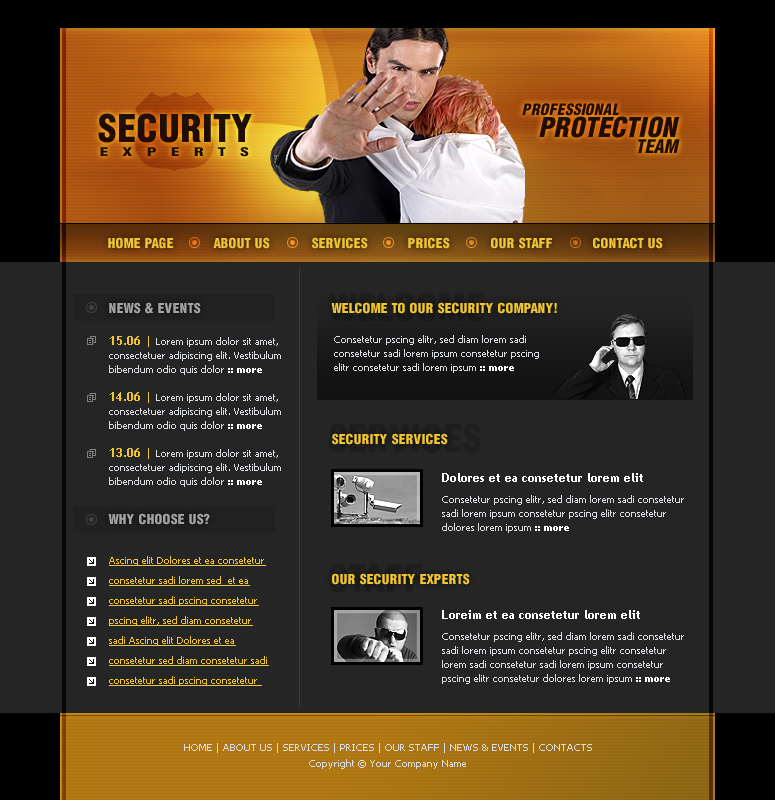
<style>
.page{position:relative;width:775px;height:800px;background:#252525}
.page>*{position:absolute;margin:0}
.t1{font:39px "HeliosCondBlack";color:#1f0e05}
.t2{font:16px "HeliosCondBlack-Italic";color:#1f0e05}
.t3{font:28px "HeliosCondBlack-Italic";color:#1f0e05}
.t4{font:12.1px "HeliosCondBlack";letter-spacing:0.78em;color:#1f0e06;scale:1.49 1}
.t5{font:19px "HeliosCondBlack-Italic";color:#1f0d05}
.t6{font:14px "HeliosCondBlack";color:#efc530}
.t7{font:14px "HeliosCondBlack";color:#a3a3a3}
.t8{font:10px/14px "Tahoma";color:#dadde2}
.t9{font:12px/14px "TrebuchetMS-Bold";color:#efc530}
.t10{font:10px/14px "Tahoma-Bold";color:#ffffff}
.t11{font:39px "HeliosCondBlack";color:#1e1e1e}
.t12{font:12px "TrebuchetMS-Bold";color:#ffffff}
.t13{font:10px/20px "Tahoma";color:#efc530;text-decoration:underline}
.t14{font:39px "HeliosCondBlack";color:#1d1d1d}
.t15{font:10px/16px "Tahoma";color:#dadde2}
</style>
<div class="page">
<p class="t1" style="left:98px;top:113px;width:154px;height:30px">SECURITY</p>
<p class="t2" style="left:522px;top:103px;width:97px;height:13px">PROFESSIONAL</p>
<p class="t3" style="left:539px;top:116px;width:141px;height:22px">PROTECTION</p>
<p class="t4" style="left:100px;top:147px;width:149px;height:10px">EXPERTS</p>
<p class="t5" style="left:638px;top:139px;width:42px;height:14px">TEAM</p>
<p class="t6" style="left:108px;top:237px;width:65px;height:12px">HOME PAGE</p>
<p class="t6" style="left:213px;top:237px;width:57px;height:12px">ABOUT US</p>
<p class="t6" style="left:312px;top:237px;width:56px;height:12px">SERVICES</p>
<p class="t6" style="left:408px;top:237px;width:42px;height:12px">PRICES</p>
<p class="t6" style="left:491px;top:237px;width:61px;height:12px">OUR STAFF</p>
<p class="t6" style="left:593px;top:237px;width:70px;height:12px">CONTACT US</p>
<p class="t7" style="left:109px;top:302px;width:92px;height:12px">NEWS &amp; EVENTS</p>
<p class="t6" style="left:331px;top:302px;width:226px;height:12px">WELCOME TO OUR SECURITY COMPANY!</p>
<p class="t8" style="left:109px;top:336px;width:172px;height:151px"><span class="t9">15.06 | </span>Lorem ipsum dolor sit amet, consectetuer adipiscing elit. Vestibulum bibendum odio quis dolor <span class="t10">:: more<br><br></span><span class="t9">14.06 | </span>Lorem ipsum dolor sit amet, consectetuer adipiscing elit. Vestibulum bibendum odio quis dolor <span class="t10">:: more<br><br></span><span class="t9">13.06 | </span>Lorem ipsum dolor sit amet, consectetuer adipiscing elit. Vestibulum bibendum odio quis dolor <span class="t10">:: more</span></p>
<p class="t8" style="left:334px;top:335px;width:205px;height:38px">Consetetur pscing elitr, sed diam lorem sadi consetetur sadi lorem ipsum consetetur pscing elitr consetetur sadi lorem ipsum <span class="t10">:: more</span></p>
<p class="t11" style="left:329px;top:423px;width:152px;height:30px">SERVICES</p>
<p class="t6" style="left:332px;top:433px;width:116px;height:12px">SECURITY SERVICES</p>
<p class="t12" style="left:442px;top:473px;width:201px;height:9px">Dolores et ea consetetur lorem elit</p>
<p class="t8" style="left:442px;top:495px;width:242px;height:38px">Consetetur pscing elitr, sed diam lorem sadi consetetur sadi lorem ipsum consetetur pscing elitr consetetur dolores lorem ipsum <span class="t10">:: more</span></p>
<p class="t7" style="left:108px;top:513px;width:102px;height:12px">WHY CHOOSE US?</p>
<p class="t13" style="left:109px;top:556px;width:160px;height:130px">Ascing elit Dolores et ea consetetur consetetur sadi lorem sed  et ea consetetur sadi pscing consetetur pscing elitr, sed diam consetetur sadi Ascing elit Dolores et ea consetetur sed diam consetetur sadi<br>consetetur sadi pscing consetetur</p>
<p class="t14" style="left:329px;top:563px;width:93px;height:30px">STAFF</p>
<p class="t6" style="left:332px;top:573px;width:138px;height:12px">OUR SECURITY EXPERTS</p>
<p class="t12" style="left:442px;top:610px;width:198px;height:9px">Loreim et ea consetetur lorem elit</p>
<p class="t8" style="left:442px;top:632px;width:242px;height:52px">Consetetur pscing elitr, sed diam lorem sadi consetetur sadi lorem ipsum consetetur pscing elitr consetetur lorem sadi consetetur sadi lorem ipsum consetetur pscing elitr consetetur dolores lorem ipsum <span class="t10">:: more</span></p>
<p class="t15" style="left:184px;top:743px;width:408px;height:26px;text-align:center">HOME | ABOUT US | SERVICES | PRICES | OUR STAFF | NEWS &amp; EVENTS | CONTACTS<br>Copyright © Your Company Name</p>
</div>
